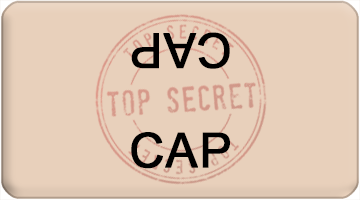
<style>
.page{position:relative;width:360px;height:200px;background:#e8d0bb}
.page>*{position:absolute;margin:0}
.t1{font:48px "ArialMT";color:#000000;font-weight:bold}
</style>
<div class="page">
<p class="t1" style="left:131px;top:32px;width:99px;height:37px;rotate:180deg">CAP</p>
<p class="t1" style="left:131px;top:132px;width:99px;height:37px">CAP</p>
</div>
